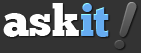
<style>
.page{position:relative;width:141px;height:53px;background:#333333}
.page>*{position:absolute;margin:0}
.t1{font:44.4px "ChunkFive";color:#ffffff}
.t2{font:44.4px "ChunkFive";color:#66acf1}
.t3{font:74px "HarlowSolid";color:#5e5e5e}
</style>
<div class="page">
<p class="t1" style="left:3px;top:3px;width:106px;height:34px">ask<span class="t2">it</span></p>
<p class="t3" style="left:114px;top:2px;width:23px;height:47px">!</p>
</div>
